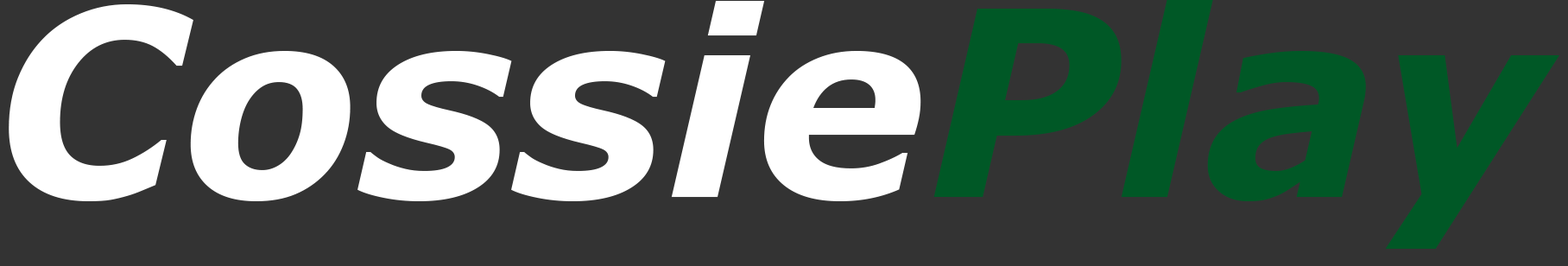
<style>
.page{position:relative;width:1568px;height:266px;background:#333333}
.page>*{position:absolute;margin:0}
.t1{font:259px "Verdana-BoldItalic";color:#ffffff}
.t2{font:259px "Verdana-BoldItalic";color:#005826}
</style>
<div class="page">
<p class="t1" style="left:9px;top:0px;width:1550px;height:249px">Cossie<span class="t2">Play</span></p>
</div>
